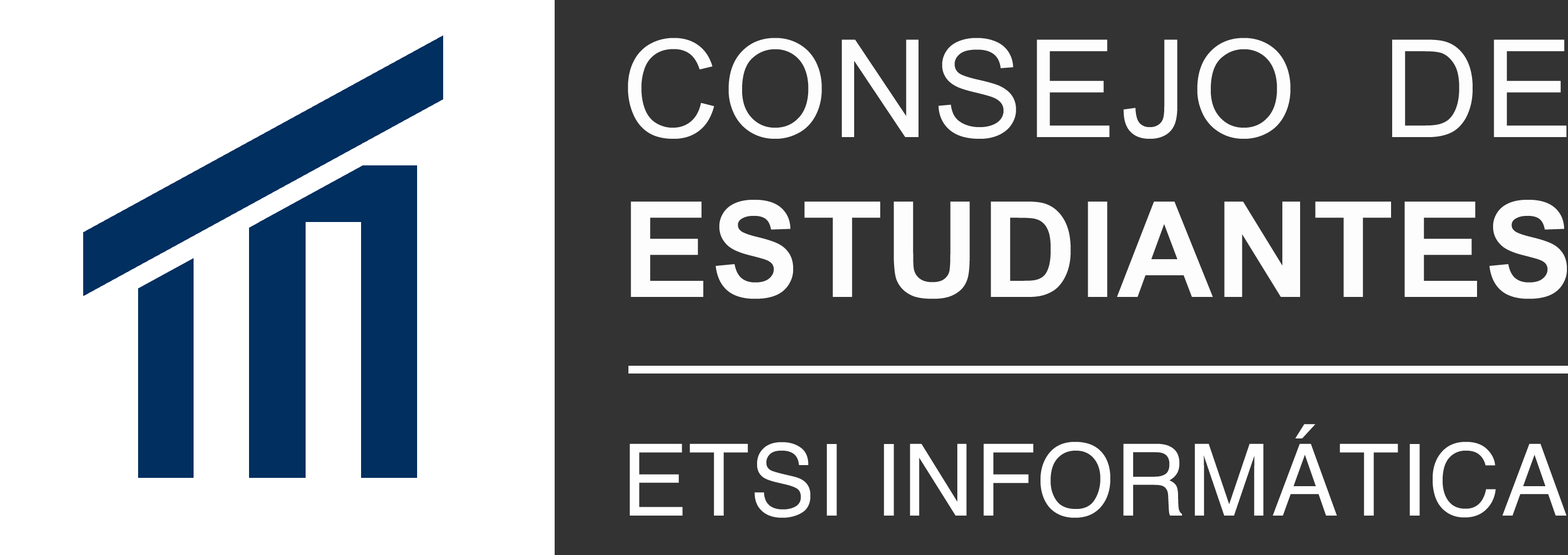
<style>
.page{position:relative;width:1568px;height:555px;background:#333333}
.page>*{position:absolute;margin:0}
.t1{font:135.9px "ArialMT";letter-spacing:0.023em;color:#fdfdfd}
.t2{font:133.1px "Arial-BoldMT";letter-spacing:0.01em;color:#fdfdfd}
.t3{font:99.8px "Helvetica";letter-spacing:0.006em;color:#ffffff}
</style>
<div class="page">
<p class="t1" style="left:628px;top:38px;width:939px;height:261px">CONSEJO  DE<br><span class="t2">ESTUDIANTES</span></p>
<p class="t3" style="left:630px;top:424px;width:937px;height:93px">ETSI INFORMÁTICA</p>
</div>
